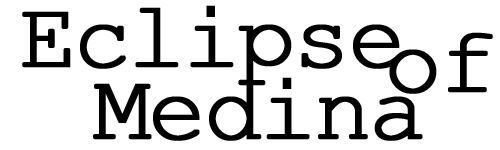
<style>
.page{position:relative;width:500px;height:150px;background:#ffffff}
.page>*{position:absolute;margin:0}
.t1{font:95px "CourierNewPSMT";letter-spacing:-0.05em;color:#000000;font-weight:bold}
</style>
<div class="page">
<p class="t1" style="left:22px;top:5px;width:378px;height:81px">Eclipse</p>
<p class="t1" style="left:389px;top:32px;width:104px;height:62px">of</p>
<p class="t1" style="left:93px;top:77px;width:330px;height:64px">Medina</p>
</div>
